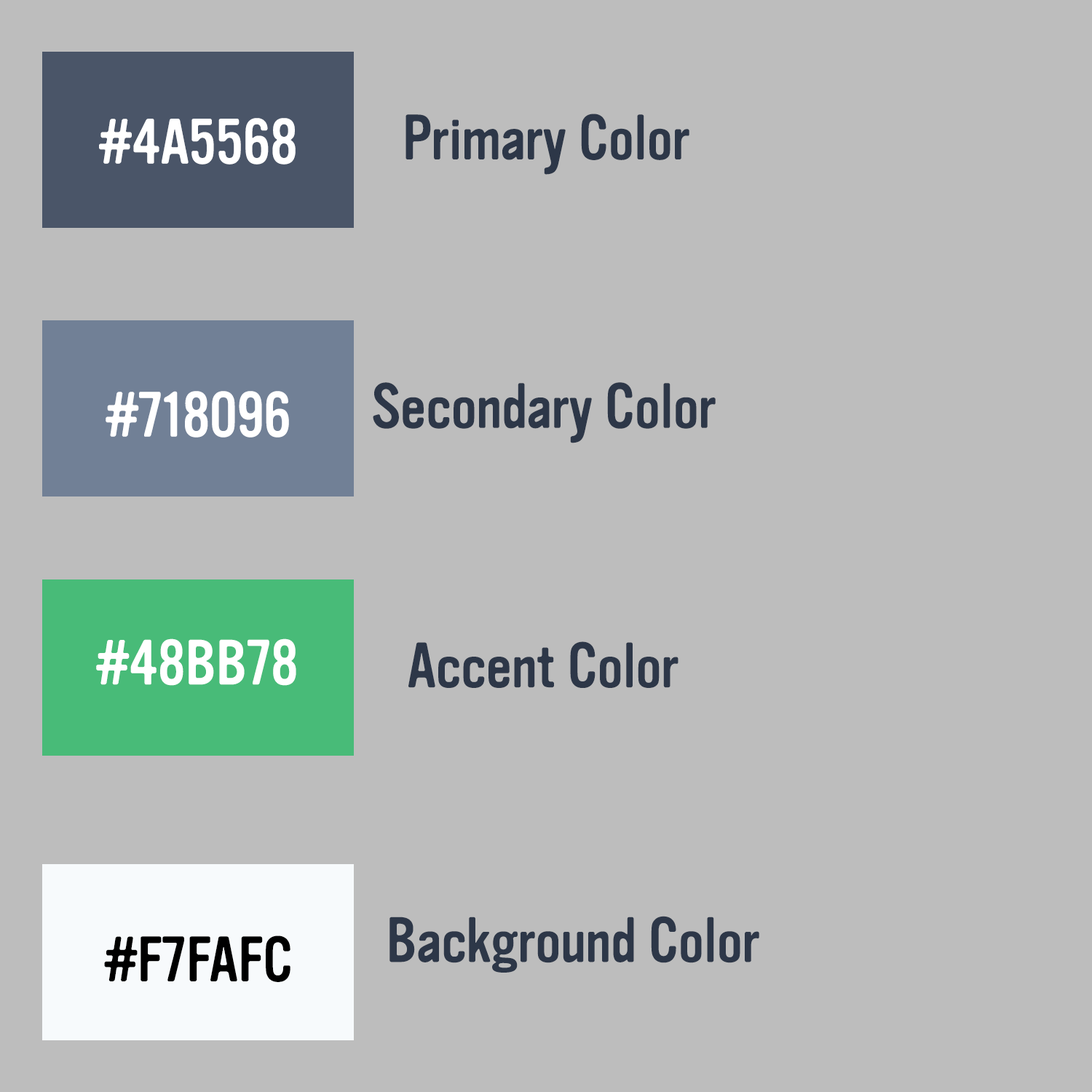
<style>
.page{position:relative;width:1092px;height:1092px;background:#bdbdbd}
.page>*{position:absolute;margin:0}
.t1{font:62.6px "VinylOT-Regular";color:#2d3748}
.t2{font:62.6px "VinylOT-Regular";color:#ffffff}
.t3{font:62.6px "VinylOT-Regular";color:#000000}
</style>
<div class="page">
<p class="t1" style="left:405px;top:114px;width:284px;height:61px">Primary Color</p>
<p class="t2" style="left:99px;top:118px;width:197px;height:47px">#4A5568</p>
<p class="t1" style="left:373px;top:382px;width:343px;height:61px">Secondary Color</p>
<p class="t2" style="left:106px;top:391px;width:183px;height:47px">#718096</p>
<p class="t2" style="left:96px;top:638px;width:200px;height:48px">#48BB78</p>
<p class="t1" style="left:408px;top:641px;width:270px;height:47px">Accent Color</p>
<p class="t1" style="left:389px;top:916px;width:370px;height:57px">Background Color</p>
<p class="t3" style="left:104px;top:935px;width:186px;height:47px">#F7FAFC</p>
</div>
